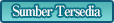
<style>
.page{position:relative;width:114px;height:23px;background:#115777}
.page>*{position:absolute;margin:0}
.t1{font:14px "RyuminPro-ExBold";letter-spacing:-0.08em;color:#ffffff;scale:0.9 1}
</style>
<div class="page">
<p class="t1" style="left:12px;top:5px;width:89px;height:12px">Sumber Tersedia</p>
</div>
